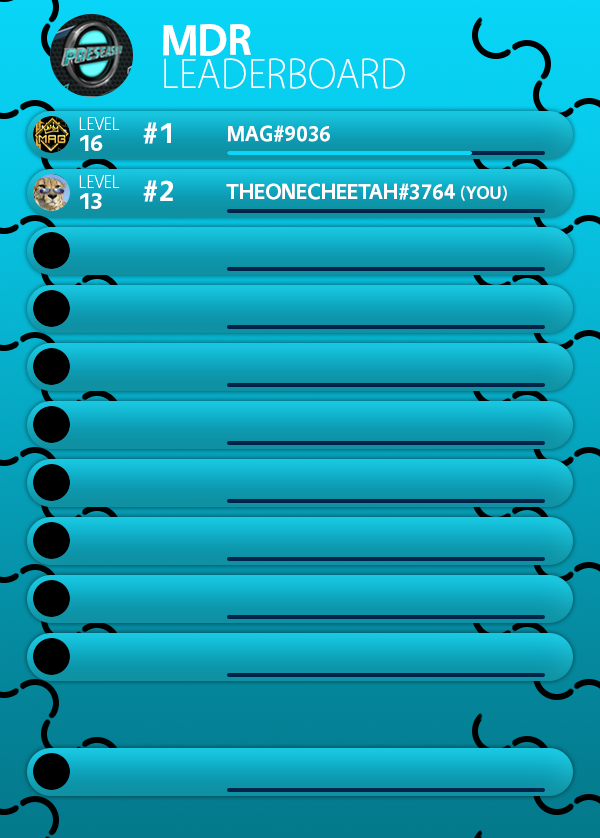
<style>
.page{position:relative;width:600px;height:838px}
.page>*{position:absolute;margin:0}
.t1{font:44px "Vegur-Bold";color:#ffffff}
.t2{font:42px "Vegur-Light";color:#ffffff}
.t3{font:18px "Vegur-Light";color:#ffffff}
.t4{font:30px "Vegur-Bold";color:#ffffff}
.t5{font:22px "Vegur-Bold";color:#ffffff}
.t6{font:24px "Vegur-Bold";color:#ffffff}
.t7{font:18px "Vegur-Bold";color:#ffffff}
</style>
<div class="page">
<p class="t1" style="left:163px;top:24px;width:88px;height:32px">MDR</p>
<p class="t2" style="left:164px;top:58px;width:241px;height:31px">LEADERBOARD</p>
<p class="t3" style="left:79px;top:117px;width:41px;height:13px">LEVEL</p>
<p class="t4" style="left:143px;top:122px;width:28px;height:22px">#1</p>
<p class="t5" style="left:227px;top:125px;width:103px;height:17px">MAG#9036</p>
<p class="t6" style="left:80px;top:135px;width:23px;height:16px">16</p>
<p class="t3" style="left:79px;top:175px;width:41px;height:13px">LEVEL</p>
<p class="t4" style="left:143px;top:180px;width:30px;height:22px">#2</p>
<p class="t5" style="left:226px;top:183px;width:281px;height:18px">THEONECHEETAH#3764 <span class="t7">(YOU)</span></p>
<p class="t6" style="left:80px;top:193px;width:22px;height:16px">13</p>
</div>
